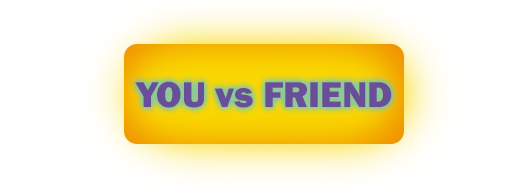
<style>
.page{position:relative;width:528px;height:188px;background:#ffffff}
.page>*{position:absolute;margin:0}
.t1{font:37px "FranklinGothic-Heavy";color:#694e9a}
</style>
<div class="page">
<p class="t1" style="left:135px;top:81px;width:257px;height:27px">YOU vs FRIEND</p>
</div>
